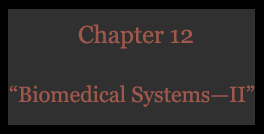
<style>
.page{position:relative;width:264px;height:134px;background:#313030}
.page>*{position:absolute;margin:0}
.t1{font:24.5px "Georgia";letter-spacing:-0.005em;color:#a1584c}
.t2{font:22px "Georgia";letter-spacing:-0.005em;color:#a1584c}
</style>
<div class="page">
<p class="t1" style="left:78px;top:24px;width:115px;height:25px">Chapter 12</p>
<p class="t2" style="left:9px;top:85px;width:246px;height:22px">“Biomedical Systems—II”</p>
</div>
